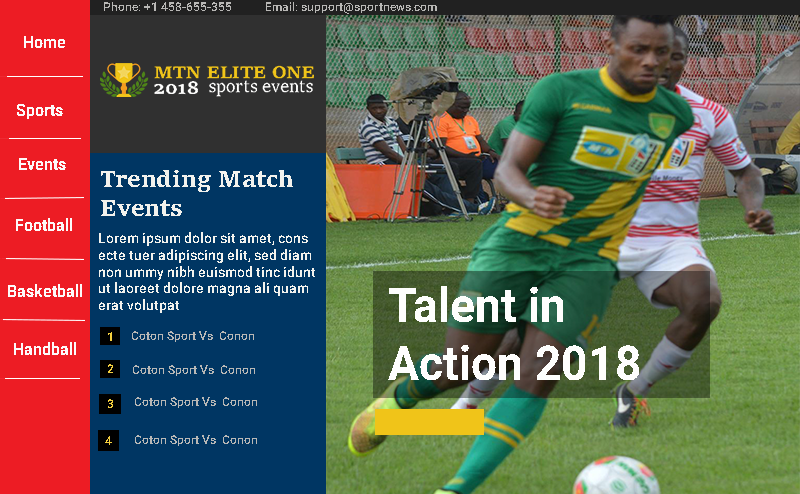
<style>
.page{position:relative;width:800px;height:494px}
.page>*{position:absolute;margin:0}
.t1{font:12px "Roboto-Medium";color:#b9b8b6;scale:0.96 1}
.t2{font:17px "Roboto-Bold";color:#fdf9f9;scale:0.96 1}
.t3{font:24px "SitkaSmall-Bold";color:#f3f2ed;scale:0.96 1}
.t4{font:14px "Roboto-Medium";color:#f3f2ed;scale:0.96 1}
.t5{font:48px "Roboto-Bold";color:#fefefd;scale:0.96 1}
.t6{font:12px "Roboto-Medium";color:#f5d03f;scale:0.96 1}
</style>
<div class="page">
<p class="t1" style="left:104px;top:2px;width:333px;height:12px">Phone: +1 458-655-355           Email: support@sportnews.com</p>
<p class="t2" style="left:24px;top:36px;width:41px;height:12px">Home</p>
<p class="t2" style="left:17px;top:104px;width:46px;height:15px">Sports</p>
<p class="t2" style="left:19px;top:158px;width:47px;height:12px">Events</p>
<p class="t3" style="left:101px;top:170px;width:192px;height:46px">Trending Match <br>Events</p>
<p class="t2" style="left:16px;top:218px;width:56px;height:13px">Football</p>
<p class="t4" style="left:99px;top:232px;width:216px;height:81px">Lorem ipsum dolor sit amet, cons <br>ecte tuer adipiscing elit, sed diam<br>non ummy nibh euismod tinc idunt<br>ut laoreet dolore magna ali quam <br>erat volutpat</p>
<p class="t2" style="left:8px;top:284px;width:74px;height:13px">Basketball</p>
<p class="t5" style="left:388px;top:286px;width:251px;height:94px">Talent in <br>Action 2018</p>
<p class="t2" style="left:14px;top:342px;width:62px;height:13px">Handball</p>
<p class="t6" style="left:108px;top:332px;width:4px;height:9px">1</p>
<p class="t1" style="left:132px;top:331px;width:122px;height:11px">Coton Sport Vs  Conon</p>
<p class="t6" style="left:108px;top:364px;width:5px;height:9px">2</p>
<p class="t1" style="left:133px;top:365px;width:122px;height:11px">Coton Sport Vs  Conon</p>
<p class="t6" style="left:108px;top:399px;width:5px;height:9px">3</p>
<p class="t1" style="left:135px;top:397px;width:122px;height:11px">Coton Sport Vs  Conon</p>
<p class="t6" style="left:105px;top:436px;width:7px;height:9px">4</p>
<p class="t1" style="left:135px;top:435px;width:122px;height:11px">Coton Sport Vs  Conon</p>
</div>
